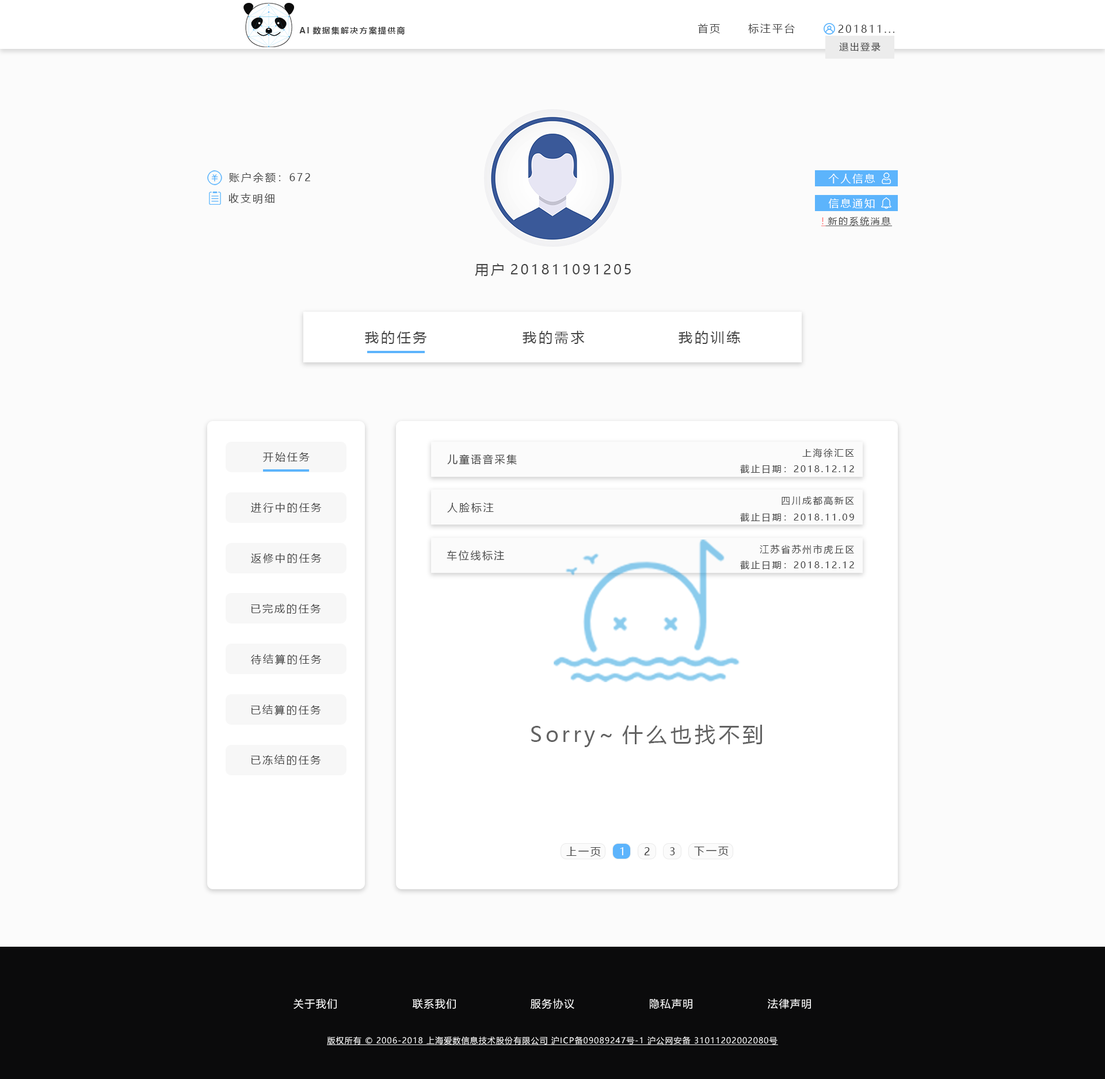
<style>
.page{position:relative;width:1105px;height:1079px;background:#fbfbfb}
.page>*{position:absolute;margin:0}
.t1{font:8.1px "MicrosoftYaHei-Bold";letter-spacing:0.16em;color:#434343}
.t2{font:10.4px "MicrosoftYaHei";letter-spacing:0.16em;color:#434343}
.t3{font:9.2px "MicrosoftYaHei";letter-spacing:0.16em;color:#434343}
.t4{font:10.4px "MicrosoftYaHei";letter-spacing:0.16em;color:#ffffff}
.t5{font:9.2px "MicrosoftYaHei";letter-spacing:0.16em;color:#434343;text-decoration:underline}
.t6{font:9.2px "MicrosoftYaHei";letter-spacing:0.16em;color:#ff7777;text-decoration:underline}
.t7{font:13.8px "MicrosoftYaHei";letter-spacing:0.16em;color:#434343}
.t8{font:20.7px "MicrosoftYaHei";letter-spacing:0.16em;color:#626262}
.t9{font:10.4px "MicrosoftYaHei";letter-spacing:0.08em;color:#fbfbfb}
.t10{font:8.1px "MicrosoftYaHei";letter-spacing:0.08em;color:#fbfbfb;text-decoration:underline}
</style>
<div class="page">
<p class="t1" style="left:299px;top:26px;width:105px;height:9px">AI数据集解决方案提供商</p>
<p class="t2" style="left:697px;top:24px;width:23px;height:9px">首页</p>
<p class="t2" style="left:748px;top:24px;width:47px;height:9px">标注平台</p>
<p class="t2" style="left:838px;top:25px;width:56px;height:8px">201811...</p>
<p class="t3" style="left:839px;top:42px;width:41px;height:9px">退出登录</p>
<p class="t2" style="left:229px;top:173px;width:81px;height:9px">账户余额：672</p>
<p class="t4" style="left:828px;top:174px;width:47px;height:10px">个人信息</p>
<p class="t2" style="left:228px;top:193px;width:46px;height:11px">收支明细</p>
<p class="t4" style="left:828px;top:199px;width:47px;height:9px">信息通知</p>
<p class="t5" style="left:821px;top:216px;width:71px;height:11px"><span class="t6">!</span>新的系统消息</p>
<p class="t7" style="left:475px;top:264px;width:156px;height:12px">用户201811091205</p>
<p class="t7" style="left:365px;top:331px;width:62px;height:13px">我的任务</p>
<p class="t7" style="left:522px;top:331px;width:63px;height:13px">我的需求</p>
<p class="t7" style="left:678px;top:331px;width:63px;height:13px">我的训练</p>
<p class="t3" style="left:802px;top:448px;width:52px;height:10px">上海徐汇区</p>
<p class="t2" style="left:263px;top:452px;width:47px;height:10px">开始任务</p>
<p class="t2" style="left:447px;top:454px;width:70px;height:11px">儿童语音采集</p>
<p class="t3" style="left:740px;top:464px;width:114px;height:10px">截止日期：2018.12.12</p>
<p class="t3" style="left:781px;top:496px;width:73px;height:9px">四川成都高新区</p>
<p class="t2" style="left:251px;top:503px;width:71px;height:10px">进行中的任务</p>
<p class="t2" style="left:447px;top:503px;width:47px;height:10px">人脸标注</p>
<p class="t3" style="left:740px;top:513px;width:114px;height:9px">截止日期：2018.11.09</p>
<p class="t3" style="left:759px;top:545px;width:95px;height:10px">江苏省苏州市虎丘区</p>
<p class="t2" style="left:251px;top:554px;width:71px;height:9px">返修中的任务</p>
<p class="t2" style="left:446px;top:551px;width:58px;height:10px">车位线标注</p>
<p class="t3" style="left:740px;top:560px;width:114px;height:10px">截止日期：2018.12.12</p>
<p class="t2" style="left:251px;top:604px;width:70px;height:10px">已完成的任务</p>
<p class="t2" style="left:251px;top:654px;width:71px;height:11px">待结算的任务</p>
<p class="t2" style="left:251px;top:705px;width:70px;height:11px">已结算的任务</p>
<p class="t8" style="left:531px;top:725px;width:231px;height:22px">Sorry~什么也找不到</p>
<p class="t2" style="left:251px;top:755px;width:70px;height:10px">已冻结的任务</p>
<p class="t2" style="left:566px;top:847px;width:35px;height:10px">上一页</p>
<p class="t4" style="left:620px;top:848px;width:3px;height:8px">1</p>
<p class="t2" style="left:644px;top:848px;width:6px;height:8px">2</p>
<p class="t2" style="left:670px;top:848px;width:5px;height:8px">3</p>
<p class="t2" style="left:694px;top:847px;width:34px;height:9px">下一页</p>
<p class="t9" style="left:293px;top:999px;width:44px;height:10px">关于我们</p>
<p class="t9" style="left:413px;top:999px;width:43px;height:10px">联系我们</p>
<p class="t9" style="left:530px;top:999px;width:44px;height:10px">服务协议</p>
<p class="t9" style="left:650px;top:999px;width:42px;height:10px">隐私声明</p>
<p class="t9" style="left:768px;top:999px;width:43px;height:10px">法律声明</p>
<p class="t10" style="left:327px;top:1037px;width:451px;height:8px">版权所有 © 2006-2018 上海爱数信息技术股份有限公司 沪ICP备09089247号-1 沪公网安备 31011202002080号</p>
</div>
